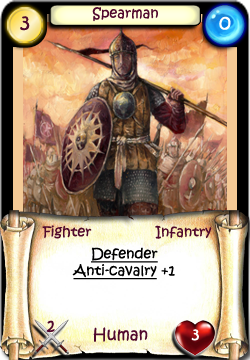
<style>
.page{position:relative;width:250px;height:360px}
.page>*{position:absolute;margin:0}
.t1{font:20px "KristenITC-Regular";color:#51092d}
.t2{font:14px "KristenITC-Regular";color:#51092d}
.t3{font:20px "KristenITC-Regular";color:#ffffff}
.t4{font:14px "KristenITC-Regular";color:#000000;text-decoration:underline}
.t5{font:14px "KristenITC-Regular";color:#000000}
.t6{font:16px "KristenITC-Regular";color:#51092d}
.t7{font:16px "KristenITC-Regular";color:#fefefe}
</style>
<div class="page">
<p class="t1" style="left:20px;top:16px;width:10px;height:15px">3</p>
<p class="t2" style="left:92px;top:7px;width:66px;height:15px">Spearman</p>
<p class="t3" style="left:219px;top:16px;width:12px;height:14px">0</p>
<p class="t2" style="left:42px;top:225px;width:50px;height:14px">Fighter</p>
<p class="t2" style="left:155px;top:225px;width:57px;height:14px">Infantry</p>
<p class="t4" style="left:72px;top:247px;width:103px;height:33px;text-align:center">Defender<br>Anti-cavalry<span class="t5"> +1</span></p>
<p class="t6" style="left:46px;top:320px;width:9px;height:12px">2</p>
<p class="t6" style="left:93px;top:327px;width:55px;height:15px">Human</p>
<p class="t7" style="left:191px;top:329px;width:8px;height:12px">3</p>
</div>
